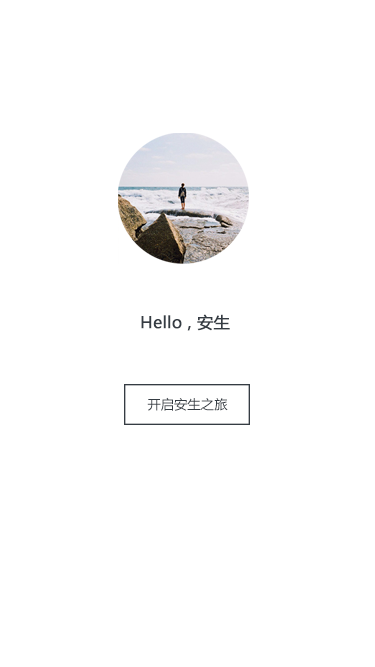
<style>
.page{position:relative;width:375px;height:667px;background:#ffffff}
.page>*{position:absolute;margin:0}
.t1{font:16px "MicrosoftYaHei";color:#353c43;font-weight:bold}
.t2{font:13.3px "MicrosoftYaHei";color:#353c43}
</style>
<div class="page">
<p class="t1" style="left:141px;top:314px;width:89px;height:17px">Hello , 安生</p>
<p class="t2" style="left:147px;top:397px;width:81px;height:14px">开启安生之旅</p>
</div>
